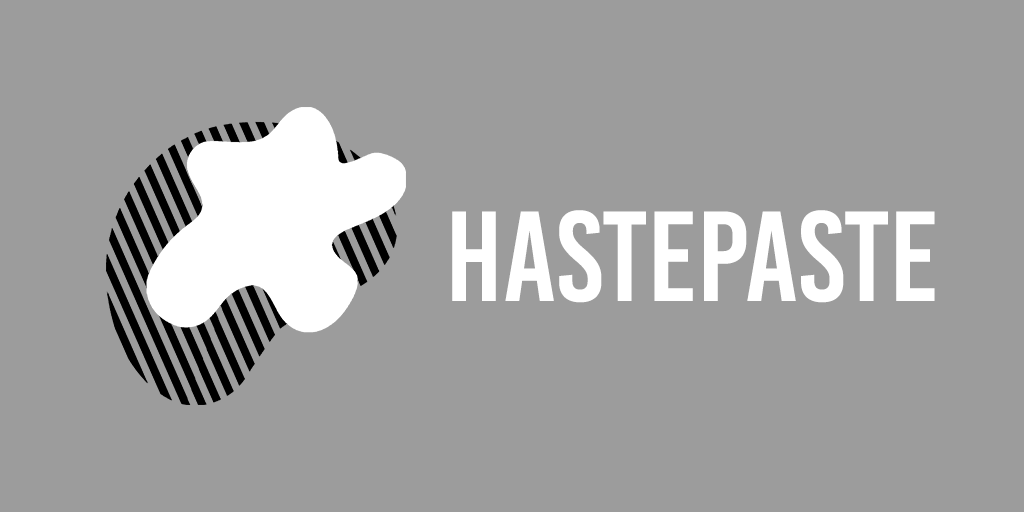
<style>
.page{position:relative;width:1024px;height:512px;background:#9c9c9c}
.page>*{position:absolute;margin:0}
.t1{font:128px "BebasKai";color:#ffffff}
</style>
<div class="page">
<p class="t1" style="left:452px;top:210px;width:483px;height:93px">hastepaste</p>
</div>
